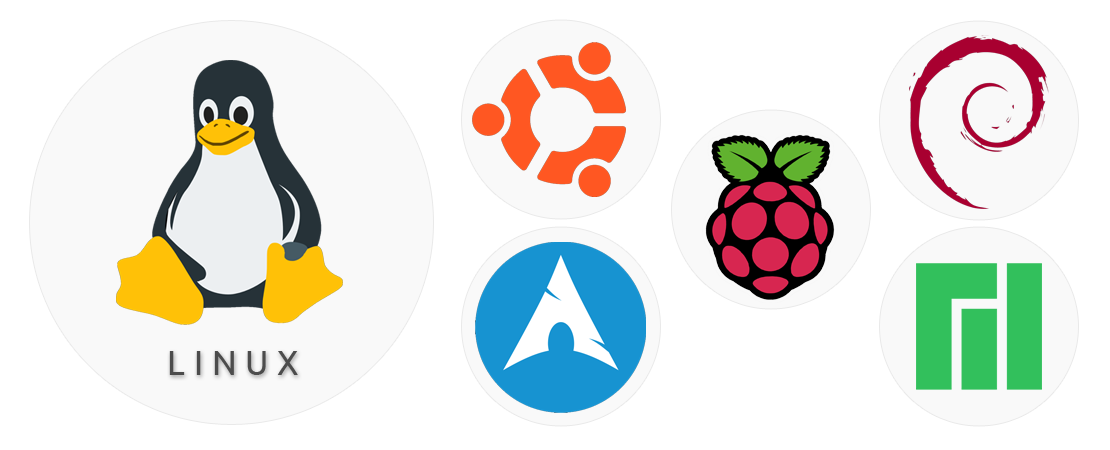
<style>
.page{position:relative;width:1110px;height:450px;background:#ffffff}
.page>*{position:absolute;margin:0}
.t1{font:34px "Ubuntu";letter-spacing:0.26em;color:#4c4c4c}
</style>
<div class="page">
<p class="t1" style="left:169px;top:351px;width:129px;height:24px">LINUX</p>
</div>
